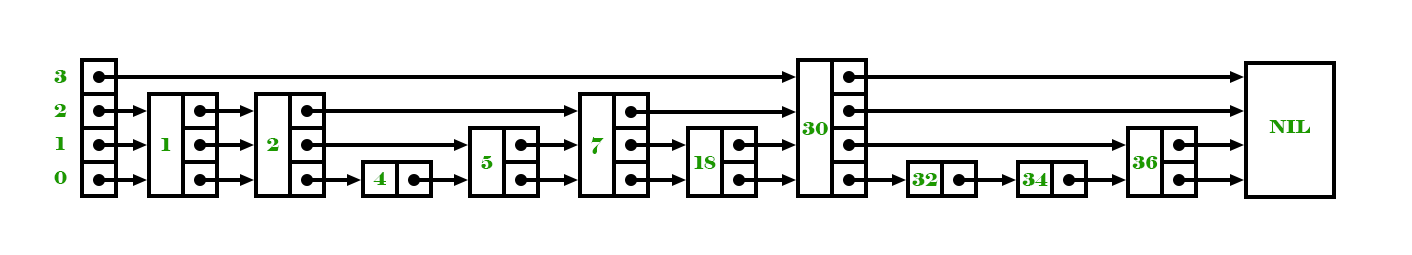
<style>
.page{position:relative;width:1412px;height:255px;background:#ffffff}
.page>*{position:absolute;margin:0}
.t1{font:18px "Elephant-Regular";color:#1d9900}
</style>
<div class="page">
<p class="t1" style="left:54px;top:70px;width:13px;height:13px">3</p>
<p class="t1" style="left:54px;top:104px;width:13px;height:13px">2</p>
<p class="t1" style="left:802px;top:122px;width:26px;height:13px">30</p>
<p class="t1" style="left:1269px;top:120px;width:41px;height:13px">NIL</p>
<p class="t1" style="left:55px;top:137px;width:10px;height:13px">1</p>
<p class="t1" style="left:591px;top:137px;width:13px;height:17px">7</p>
<p class="t1" style="left:161px;top:138px;width:10px;height:13px">1</p>
<p class="t1" style="left:267px;top:138px;width:12px;height:13px">2</p>
<p class="t1" style="left:481px;top:156px;width:12px;height:13px">5</p>
<p class="t1" style="left:694px;top:156px;width:22px;height:13px">18</p>
<p class="t1" style="left:1132px;top:156px;width:26px;height:13px">36</p>
<p class="t1" style="left:54px;top:171px;width:13px;height:13px">0</p>
<p class="t1" style="left:373px;top:172px;width:13px;height:13px">4</p>
<p class="t1" style="left:912px;top:173px;width:26px;height:13px">32</p>
<p class="t1" style="left:1022px;top:173px;width:26px;height:13px">34</p>
</div>
